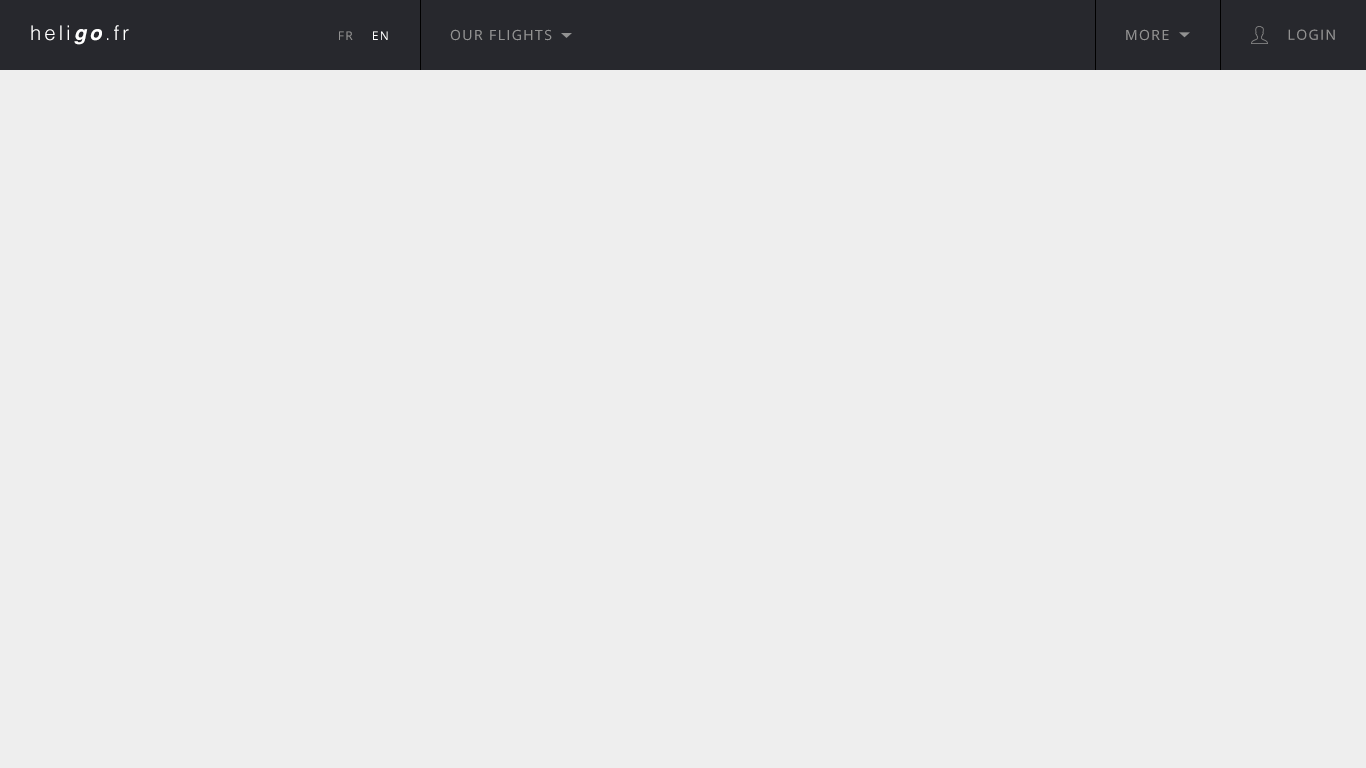
<style>
.page{position:relative;width:1366px;height:768px;background:#eeeeee}
.page>*{position:absolute;margin:0}
.t1{font:20px "Helvetica-Light";letter-spacing:0.16em;color:#ffffff}
.t2{font:20px "Helvetica-BoldOblique";letter-spacing:0.16em;color:#ffffff}
.t3{font:14px "OpenSans";letter-spacing:0.1em;color:#929292;text-transform:uppercase}
.t4{font:12px "OpenSans";letter-spacing:0.1em;color:#929292;text-transform:uppercase}
.t5{font:12px "OpenSans";letter-spacing:0.1em;color:#ffffff;text-transform:uppercase}
</style>
<div class="page">
<p class="t1" style="left:31px;top:25px;width:98px;height:20px">heli<span class="t2">go</span>.fr</p>
<p class="t3" style="left:450px;top:29px;width:102px;height:12px">Our flights</p>
<p class="t3" style="left:1126px;top:29px;width:43px;height:12px">more</p>
<p class="t3" style="left:1288px;top:29px;width:47px;height:11px">login</p>
<p class="t4" style="left:339px;top:31px;width:14px;height:9px">Fr</p>
<p class="t5" style="left:373px;top:31px;width:15px;height:9px">En</p>
</div>
